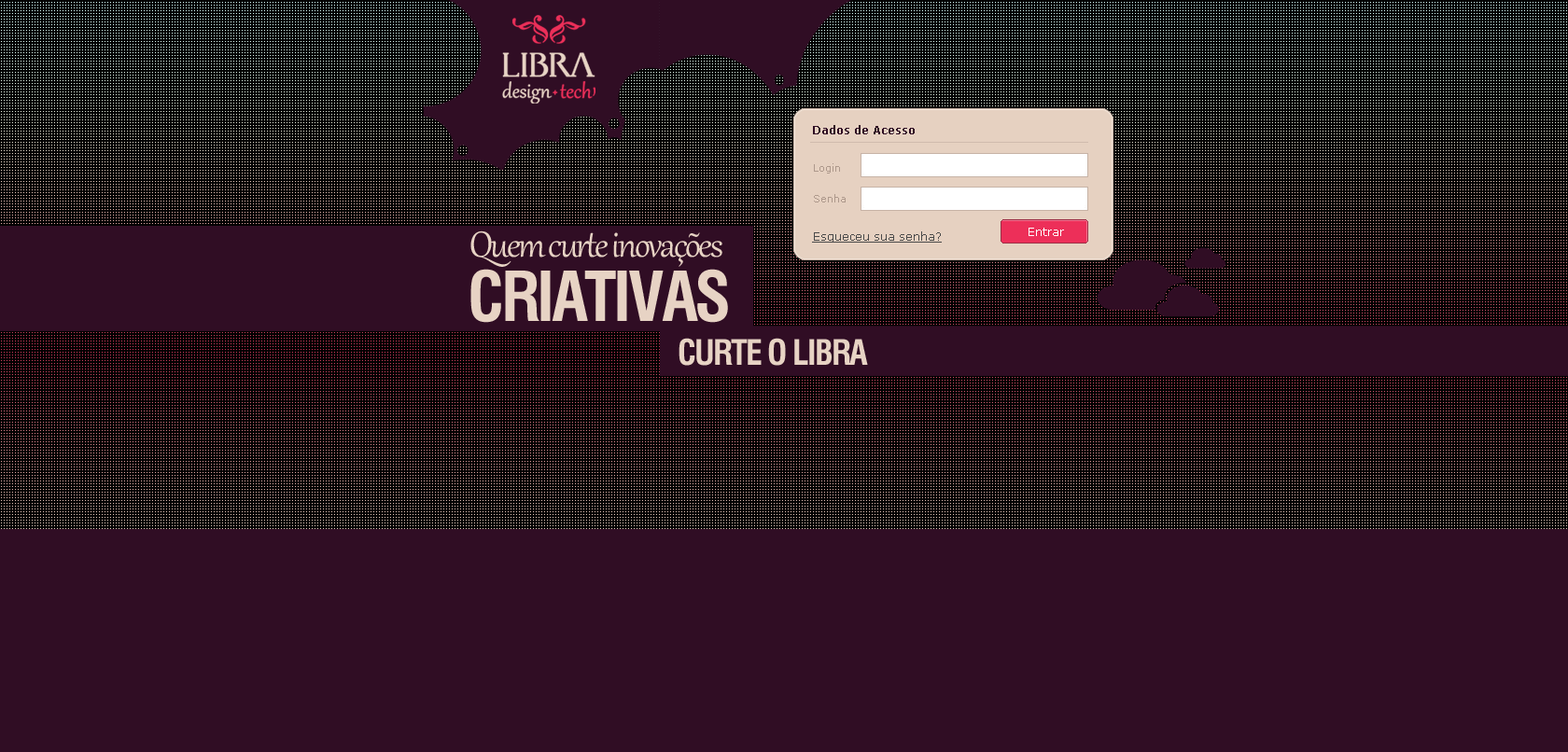
<style>
.page{position:relative;width:1568px;height:752px;background:#300d24}
.page>*{position:absolute;margin:0}
.t1{font:11.2px "Verdana-Bold";color:#300d24}
.t2{font:10.3px "Verdana";color:#ae998c}
.t3{font:44px "Gabriola";letter-spacing:-0.05em;color:#e7d3c4}
.t4{font:11.2px "Verdana";color:#4a4a4a;text-decoration:underline}
.t5{font:11.2px "Verdana";color:#ffffff}
.t6{font:67.1px "Swiss721BT-BoldCondensed";letter-spacing:-0.05em;color:#e7d3c4}
.t7{font:34px "Swiss721BT-BoldCondensed";letter-spacing:-0.05em;color:#e7d3c4}
</style>
<div class="page">
<p class="t1" style="left:813px;top:125px;width:102px;height:9px">Dados de Acesso</p>
<p class="t2" style="left:814px;top:163px;width:26px;height:11px">Login</p>
<p class="t2" style="left:814px;top:194px;width:32px;height:9px">Senha</p>
<p class="t3" style="left:470px;top:231px;width:252px;height:36px">Quem curte inovações</p>
<p class="t4" style="left:812px;top:231px;width:130px;height:12px">Esqueceu sua senha?</p>
<p class="t5" style="left:1029px;top:228px;width:35px;height:8px">Entrar</p>
<p class="t6" style="left:470px;top:269px;width:258px;height:54px">CRIATIVAS</p>
<p class="t7" style="left:679px;top:338px;width:189px;height:28px">CURTE O LIBRA</p>
</div>
